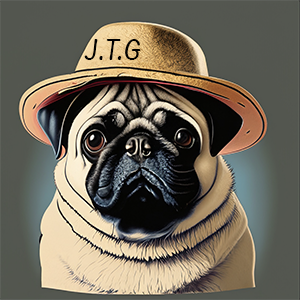
<style>
.page{position:relative;width:300px;height:300px}
.page>*{position:absolute;margin:0}
.t1{font:25px "AnnaiMN-Regular";color:#000000}
</style>
<div class="page">
<p class="t1" style="left:84px;top:39px;width:57px;height:21px">J.T.G</p>
</div>
